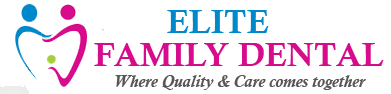
<style>
.page{position:relative;width:391px;height:94px;background:#ffffff}
.page>*{position:absolute;margin:0}
.t1{font:33.3px "CalisMTBol";color:#0089ca}
.t2{font:33.3px "CalisMTBol";color:#d70c8c}
.t3{font:16.7px "CalistoMT-BoldItalic";color:#575556}
</style>
<div class="page">
<p class="t1" style="left:167px;top:10px;width:102px;height:23px">ELITE</p>
<p class="t2" style="left:94px;top:43px;width:290px;height:23px">FAMILY DENTAL</p>
<p class="t3" style="left:115px;top:75px;width:251px;height:15px">Where Quality &amp; Care comes together</p>
</div>
